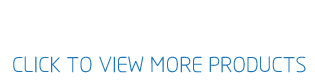
<style>
.page{position:relative;width:315px;height:80px;background:#ffffff}
.page>*{position:absolute;margin:0}
.t1{font:22px "MFYueHei_Noncommercial-Light";color:#1b77c0;text-transform:uppercase}
</style>
<div class="page">
<p class="t1" style="left:13px;top:56px;width:293px;height:17px">Click to view more products</p>
</div>
